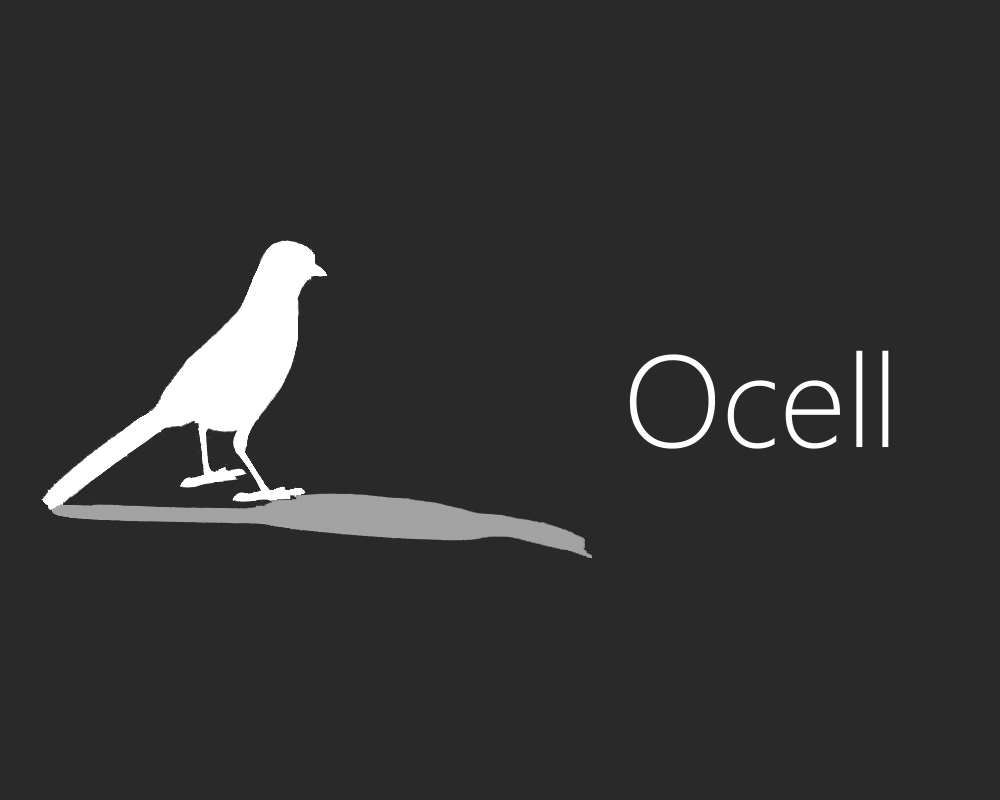
<style>
.page{position:relative;width:1000px;height:800px;background:#292929}
.page>*{position:absolute;margin:0}
.t1{font:130px "SegoeWP-Light";color:#ffffff}
</style>
<div class="page">
<p class="t1" style="left:629px;top:350px;width:260px;height:99px">Ocell</p>
</div>
